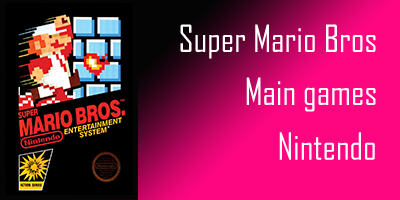
<style>
.page{position:relative;width:400px;height:200px;background:#ff0681}
.page>*{position:absolute;margin:0}
.t1{font:36px "AgencyFB-Reg";color:#ffffff}
</style>
<div class="page">
<p class="t1" style="left:180px;top:24px;width:196px;height:35px">Super Mario Bros</p>
<p class="t1" style="left:246px;top:77px;width:130px;height:35px">Main games</p>
<p class="t1" style="left:279px;top:132px;width:96px;height:28px">Nintendo</p>
</div>
